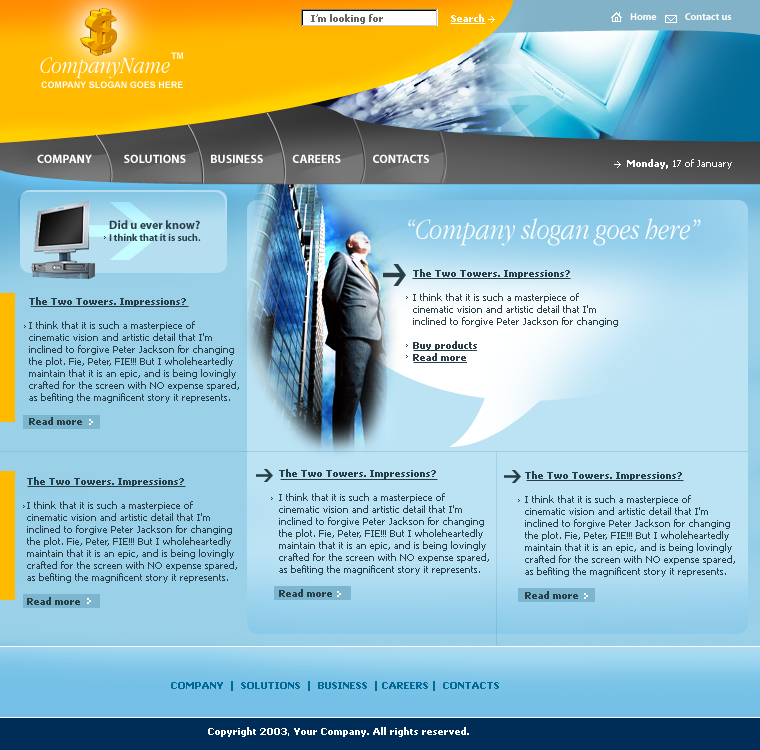
<style>
.page{position:relative;width:760px;height:750px}
.page>*{position:absolute;margin:0}
.t1{font:9px "Tahoma-Bold";color:#666666}
.t2{font:10px "Tahoma-Bold";color:#ffffff}
.t3{font:10px "Myriad-Bold";color:#ffffff}
.t4{font:9px "Arial-BoldMT";color:#ffffff}
.t5{font:24px "AppleGaramondLight-Italic";color:#ffffff}
.t6{font:12px "Myriad-Bold";color:#ffffff}
.t7{font:10px "Tahoma";color:#ffffff}
.t8{font:12px "Myriad-Bold";color:#283f48}
.t9{font:30px "AppleGaramondLight-Italic";color:#ffffff}
.t10{font:10px "Myriad-Bold";color:#283f48}
.t11{font:10px "Tahoma";color:#283f48}
.t12{font:10px "Tahoma-Bold";color:#283f48}
.t13{font:9px "Tahoma-Bold";color:#026a96}
.t14{font:9px "Tahoma-Bold";color:#ffffff}
</style>
<div class="page">
<p class="t1" style="left:311px;top:14px;width:72px;height:10px">I’m looking for</p>
<p class="t2" style="left:451px;top:14px;width:33px;height:8px">Search</p>
<p class="t3" style="left:630px;top:13px;width:102px;height:7px">Home              Contact us</p>
<p class="t4" style="left:171px;top:52px;width:12px;height:7px">TM</p>
<p class="t5" style="left:40px;top:57px;width:130px;height:22px">CompanyName</p>
<p class="t4" style="left:41px;top:81px;width:142px;height:7px">COMPANY SLOGAN GOES HERE</p>
<p class="t6" style="left:37px;top:154px;width:392px;height:9px">COMPANY             SOLUTIONS          BUSINESS            CAREERS             CONTACTS</p>
<p class="t7" style="left:627px;top:159px;width:105px;height:10px"><span class="t2">Monday, </span>17 of January</p>
<p class="t8" style="left:109px;top:220px;width:91px;height:9px">Did u ever know?</p>
<p class="t9" style="left:408px;top:218px;width:293px;height:28px">“Company slogan goes here”</p>
<p class="t10" style="left:109px;top:233px;width:92px;height:8px">I think that it is such.</p>
<p class="t11" style="left:413px;top:269px;width:205px;height:92px"><span class="t12">The Two Towers. Impressions?<br><br></span>I think that it is such a masterpiece of<br>cinematic vision and artistic detail that I'm <br>inclined to forgive Peter Jackson for changing<br><br><span class="t12">Buy products<br>Read more</span></p>
<p class="t11" style="left:29px;top:297px;width:210px;height:128px"><span class="t12">The Two Towers. Impressions?<br><br></span>I think that it is such a masterpiece of<br>cinematic vision and artistic detail that I'm <br>inclined to forgive Peter Jackson for changing<br>the plot. Fie, Peter, FIE!!! But I wholeheartedly<br>maintain that it is an epic, and is being lovingly<br>crafted for the screen with NO expense spared,<br>as befiting the magnificent story it represents.<br><span class="t12"><br>Read more</span></p>
<p class="t11" style="left:279px;top:469px;width:210px;height:128px"><span class="t12">The Two Towers. Impressions?<br><br></span>I think that it is such a masterpiece of<br>cinematic vision and artistic detail that I'm <br>inclined to forgive Peter Jackson for changing<br>the plot. Fie, Peter, FIE!!! But I wholeheartedly<br>maintain that it is an epic, and is being lovingly<br>crafted for the screen with NO expense spared,<br>as befiting the magnificent story it represents.<br><span class="t12"><br>Read more</span></p>
<p class="t11" style="left:525px;top:471px;width:210px;height:128px"><span class="t12">The Two Towers. Impressions?<br><br></span>I think that it is such a masterpiece of<br>cinematic vision and artistic detail that I'm <br>inclined to forgive Peter Jackson for changing<br>the plot. Fie, Peter, FIE!!! But I wholeheartedly<br>maintain that it is an epic, and is being lovingly<br>crafted for the screen with NO expense spared,<br>as befiting the magnificent story it represents.<br><span class="t12"><br>Read more</span></p>
<p class="t11" style="left:27px;top:477px;width:210px;height:128px"><span class="t12">The Two Towers. Impressions?<br><br></span>I think that it is such a masterpiece of<br>cinematic vision and artistic detail that I'm <br>inclined to forgive Peter Jackson for changing<br>the plot. Fie, Peter, FIE!!! But I wholeheartedly<br>maintain that it is an epic, and is being lovingly<br>crafted for the screen with NO expense spared,<br>as befiting the magnificent story it represents.<br><span class="t12"><br>Read more</span></p>
<p class="t13" style="left:171px;top:681px;width:328px;height:10px">COMPANY  |  SOLUTIONS  |  BUSINESS  | CAREERS |  CONTACTS</p>
<p class="t14" style="left:208px;top:727px;width:261px;height:10px">Copyright 2003, Your Company. All rights reserved.</p>
</div>
